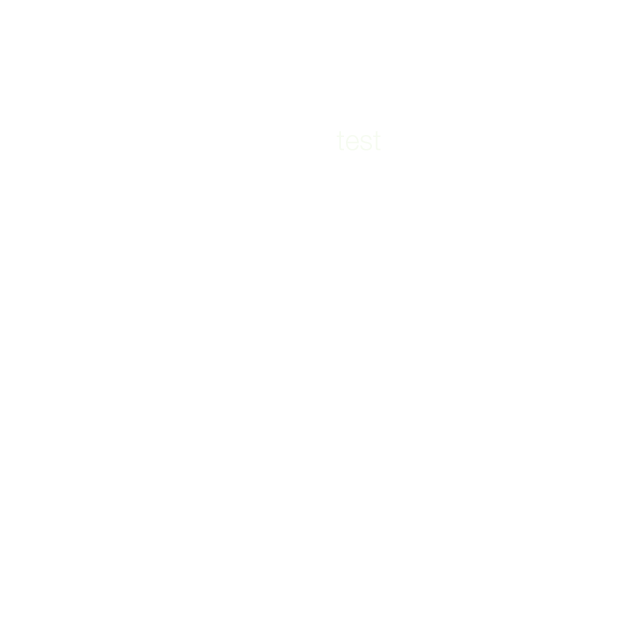
<style>
.page{position:relative;width:640px;height:640px;background:#ffffff}
.page>*{position:absolute;margin:0}
.t1{font:28px "HelveticaNeue-Light";color:#f6fbf1}
</style>
<div class="page">
<p class="t1" style="left:336px;top:131px;width:45px;height:20px">test</p>
</div>
